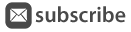
<style>
.page{position:relative;width:131px;height:32px;background:#ffffff}
.page>*{position:absolute;margin:0}
.t1{font:22.1px "MyriadPro-Semibold";color:#4b4b4b}
</style>
<div class="page">
<p class="t1" style="left:35px;top:6px;width:91px;height:17px">subscribe</p>
</div>
